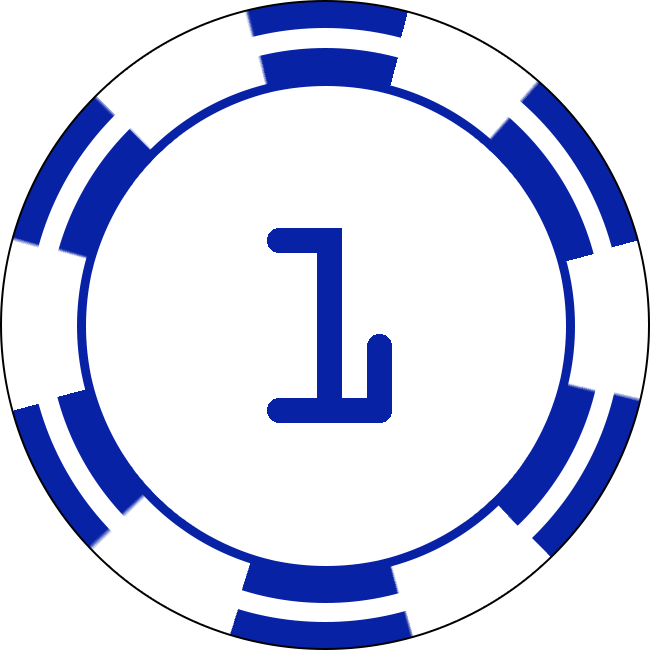
<style>
.page{position:relative;width:650px;height:650px;background:#ffffff}
.page>*{position:absolute;margin:0}
.t1{font:300px "OCRAExtended";color:#0822a5}
</style>
<div class="page">
<p class="t1" style="left:267px;top:228px;width:125px;height:195px">1</p>
</div>
